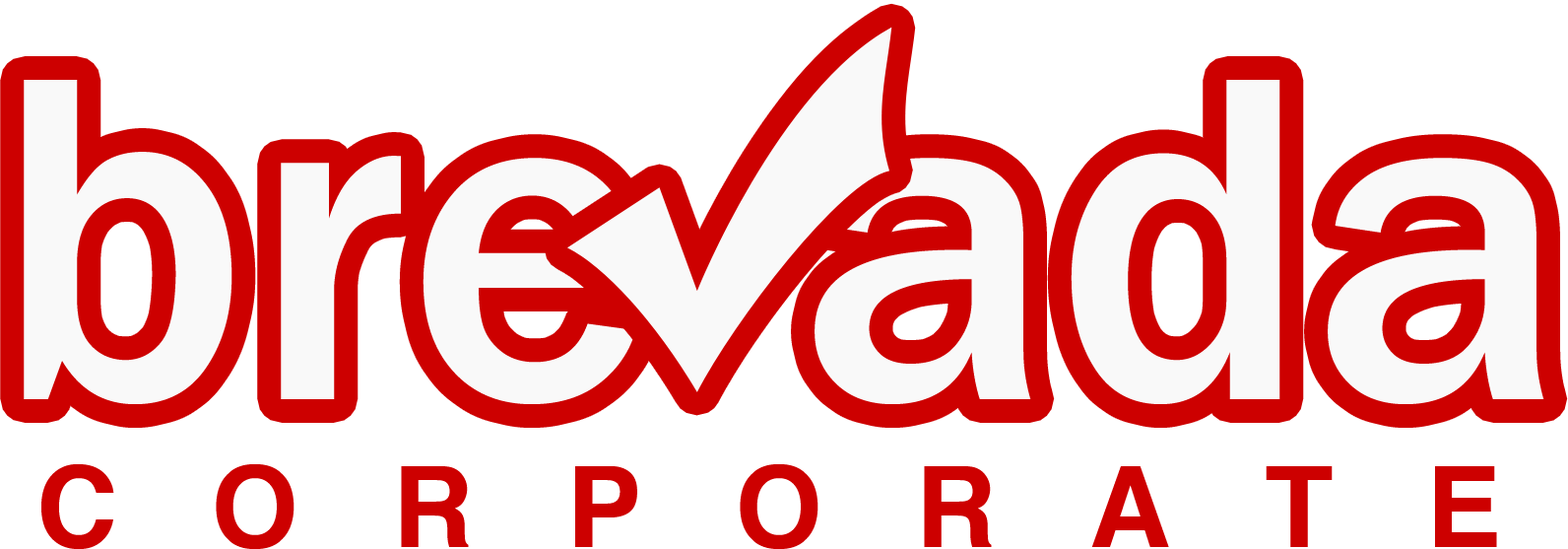
<style>
.page{position:relative;width:1568px;height:549px;background:#ffffff}
.page>*{position:absolute;margin:0}
.t1{font:478.7px "FranklinGothic-Medium";color:#f9f9f9}
.t2{font:112.1px "Helvetica-Bold";color:#cd0000}
</style>
<div class="page">
<p class="t1" style="left:24px;top:80px;width:616px;height:324px">bre</p>
<p class="t1" style="left:815px;top:80px;width:729px;height:324px">ada</p>
<p class="t2" style="left:41px;top:464px;width:1456px;height:85px">C   O   R   P   O   R   A   T   E</p>
</div>
